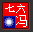
<style>
.page{position:relative;width:33px;height:32px;background:#f20000}
.page>*{position:absolute;margin:0}
.t1{font:10.4px "SimSun";color:#ffffff}
.t2{font:11.7px "SimSun";color:#ffffff}
</style>
<div class="page">
<p class="t1" style="left:5px;top:4px;width:20px;height:9px">七六</p>
<p class="t2" style="left:16px;top:15px;width:11px;height:12px">冯</p>
</div>
